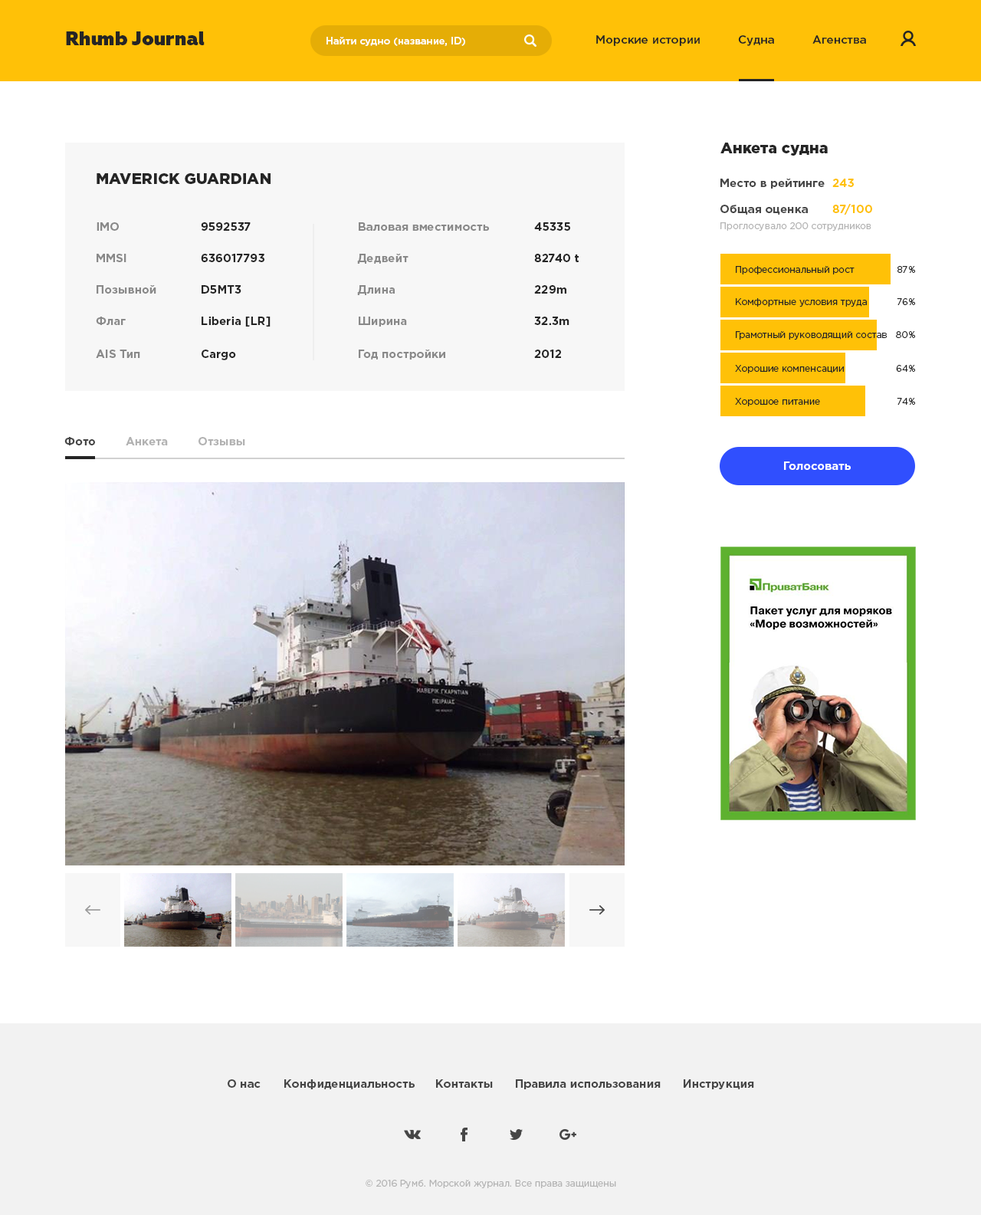
<style>
.page{position:relative;width:981px;height:1215px;background:#ffffff}
.page>*{position:absolute;margin:0}
.t1{font:19.2px "Geometria-Heavy";color:#252525}
.t2{font:10px "GothamPro-Medium";color:#ffffff}
.t3{font:11.5px "GothamPro-Medium";color:#252525}
.t4{font:15.3px "GothamPro-Black";color:#252525}
.t5{font:11.5px "GothamPro-Bold";color:#464646}
.t6{font:11.5px "GothamPro-Bold";color:#ffc107}
.t7{font:11.5px "GothamPro-Bold";color:#898989}
.t8{font:11.5px "GothamPro-Bold";color:#252525}
.t9{font:9.2px "GothamPro";color:#b4b4b4}
.t10{font:9.2px "GothamPro";color:#252525}
.t11{font:11.5px "GothamPro-Bold";color:#b2b2b2}
.t12{font:11.5px "GothamPro-Bold";color:#ffffff}
</style>
<div class="page">
<p class="t1" style="left:66px;top:31px;width:139px;height:14px">Rhumb Journal</p>
<p class="t2" style="left:327px;top:37px;width:138px;height:9px">Найти судно (название, ID)</p>
<p class="t3" style="left:596px;top:35px;width:104px;height:11px">Морские истории</p>
<p class="t3" style="left:738px;top:35px;width:36px;height:11px">Судна</p>
<p class="t3" style="left:813px;top:35px;width:53px;height:9px">Агенства</p>
<p class="t4" style="left:721px;top:143px;width:107px;height:13px">Анкета судна</p>
<p class="t4" style="left:97px;top:173px;width:174px;height:11px">MAVERICK GUARDIAN</p>
<p class="t5" style="left:721px;top:179px;width:104px;height:10px">Место в рейтинге</p>
<p class="t6" style="left:833px;top:179px;width:21px;height:8px">243</p>
<p class="t5" style="left:721px;top:205px;width:87px;height:10px">Общая оценка</p>
<p class="t6" style="left:833px;top:204px;width:39px;height:11px">87/100</p>
<p class="t7" style="left:97px;top:222px;width:22px;height:9px">IMO</p>
<p class="t8" style="left:201px;top:222px;width:50px;height:9px">9592537</p>
<p class="t7" style="left:359px;top:222px;width:130px;height:9px">Валовая вместимость</p>
<p class="t8" style="left:534px;top:222px;width:36px;height:9px">45335</p>
<p class="t9" style="left:721px;top:222px;width:151px;height:10px">Проглосувало 200 сотрудников</p>
<p class="t7" style="left:97px;top:254px;width:29px;height:8px">MMSI</p>
<p class="t8" style="left:201px;top:254px;width:63px;height:8px">636017793</p>
<p class="t7" style="left:357px;top:254px;width:52px;height:10px">Дедвейт</p>
<p class="t8" style="left:534px;top:254px;width:45px;height:8px">82740 t</p>
<p class="t10" style="left:736px;top:266px;width:119px;height:8px">Профессиональный рост</p>
<p class="t10" style="left:898px;top:266px;width:17px;height:7px">87%</p>
<p class="t7" style="left:97px;top:285px;width:59px;height:9px">Позывной</p>
<p class="t8" style="left:202px;top:285px;width:39px;height:9px">D5MT3</p>
<p class="t7" style="left:357px;top:285px;width:38px;height:10px">Длина</p>
<p class="t8" style="left:534px;top:285px;width:33px;height:9px">229m</p>
<p class="t10" style="left:736px;top:298px;width:131px;height:9px">Комфортные условия труда</p>
<p class="t10" style="left:897px;top:298px;width:18px;height:7px">76%</p>
<p class="t7" style="left:96px;top:317px;width:30px;height:8px">Флаг</p>
<p class="t8" style="left:202px;top:317px;width:69px;height:10px">Liberia [LR]</p>
<p class="t7" style="left:359px;top:317px;width:48px;height:10px">Ширина</p>
<p class="t8" style="left:534px;top:317px;width:36px;height:8px">32.3m</p>
<p class="t10" style="left:736px;top:331px;width:151px;height:9px">Грамотный руководящий состав</p>
<p class="t10" style="left:896px;top:331px;width:19px;height:7px">80%</p>
<p class="t7" style="left:96px;top:350px;width:44px;height:8px">AIS Тип</p>
<p class="t8" style="left:202px;top:350px;width:34px;height:10px">Cargo</p>
<p class="t7" style="left:359px;top:350px;width:86px;height:10px">Год постройки</p>
<p class="t8" style="left:534px;top:350px;width:27px;height:8px">2012</p>
<p class="t10" style="left:735px;top:365px;width:109px;height:8px">Хорошие компенсации</p>
<p class="t10" style="left:896px;top:365px;width:19px;height:7px">64%</p>
<p class="t10" style="left:735px;top:398px;width:85px;height:8px">Хорошое питание</p>
<p class="t10" style="left:897px;top:398px;width:18px;height:7px">74%</p>
<p class="t5" style="left:64px;top:437px;width:31px;height:8px">Фото</p>
<p class="t11" style="left:126px;top:437px;width:42px;height:8px">Анкета</p>
<p class="t11" style="left:199px;top:437px;width:46px;height:8px">Отзывы</p>
<p class="t12" style="left:784px;top:462px;width:67px;height:8px">Голосовать</p>
<p class="t5" style="left:228px;top:1079px;width:33px;height:9px">О нас</p>
<p class="t5" style="left:284px;top:1079px;width:131px;height:10px">Конфиденциальность</p>
<p class="t5" style="left:436px;top:1079px;width:57px;height:9px">Контакты</p>
<p class="t5" style="left:516px;top:1079px;width:145px;height:10px">Правила использования</p>
<p class="t5" style="left:684px;top:1079px;width:70px;height:10px">Инструкция</p>
<p class="t9" style="left:366px;top:1180px;width:250px;height:9px">© 2016 Румб. Морской журнал. Все права защищены</p>
</div>
